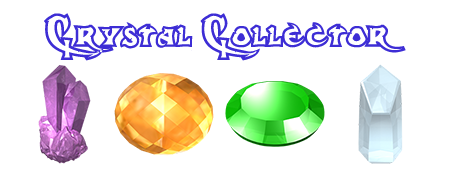
<style>
.page{position:relative;width:450px;height:170px;background:#ffffff}
.page>*{position:absolute;margin:0}
.t1{font:48px "DarkCrystalOutline";color:#3d2dd5}
</style>
<div class="page">
<p class="t1" style="left:44px;top:13px;width:362px;height:48px">Crystal Collector</p>
</div>
